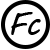
<style>
.page{position:relative;width:50px;height:50px;background:#ffffff}
.page>*{position:absolute;margin:0}
.t1{font:31.7px "MVBoli";letter-spacing:-0.06em;color:#000000;scale:1.14 1}
</style>
<div class="page">
<p class="t1" style="left:11px;top:12px;width:30px;height:23px">Fc</p>
</div>
